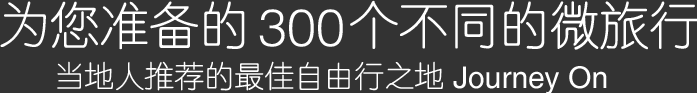
<style>
.page{position:relative;width:697px;height:93px;background:#333333}
.page>*{position:absolute;margin:0}
.t1{font:50px "-G-g-t-r-0-0-m";color:#ffffff}
.t2{font:52px "Helvetica-Light";color:#ffffff}
.t3{font:30px "-G-g-t-r-0-0-m";color:#ffffff}
.t4{font:30px "Helvetica";color:#ffffff}
</style>
<div class="page">
<p class="t1" style="left:0px;top:0px;width:698px;height:50px">为您准备的    个不同的微旅行</p>
<p class="t2" style="left:259px;top:9px;width:84px;height:38px">300</p>
<p class="t3" style="left:57px;top:61px;width:386px;height:30px">当地人推荐的最佳自由行之地</p>
<p class="t4" style="left:453px;top:66px;width:154px;height:29px">Journey On</p>
</div>
